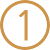
<style>
.page{position:relative;width:50px;height:50px;background:#ffffff}
.page>*{position:absolute;margin:0}
.t1{font:42px "OpenSans-CondensedLight";color:#ce954a;font-weight:bold}
</style>
<div class="page">
<p class="t1" style="left:19px;top:10px;width:9px;height:31px">1</p>
</div>
